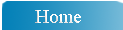
<style>
.page{position:relative;width:123px;height:30px}
.page>*{position:absolute;margin:0}
.t1{font:20px "TimesNewRomanPSMT";color:#fafafa}
</style>
<div class="page">
<p class="t1" style="left:35px;top:10px;width:46px;height:13px">Home</p>
</div>
